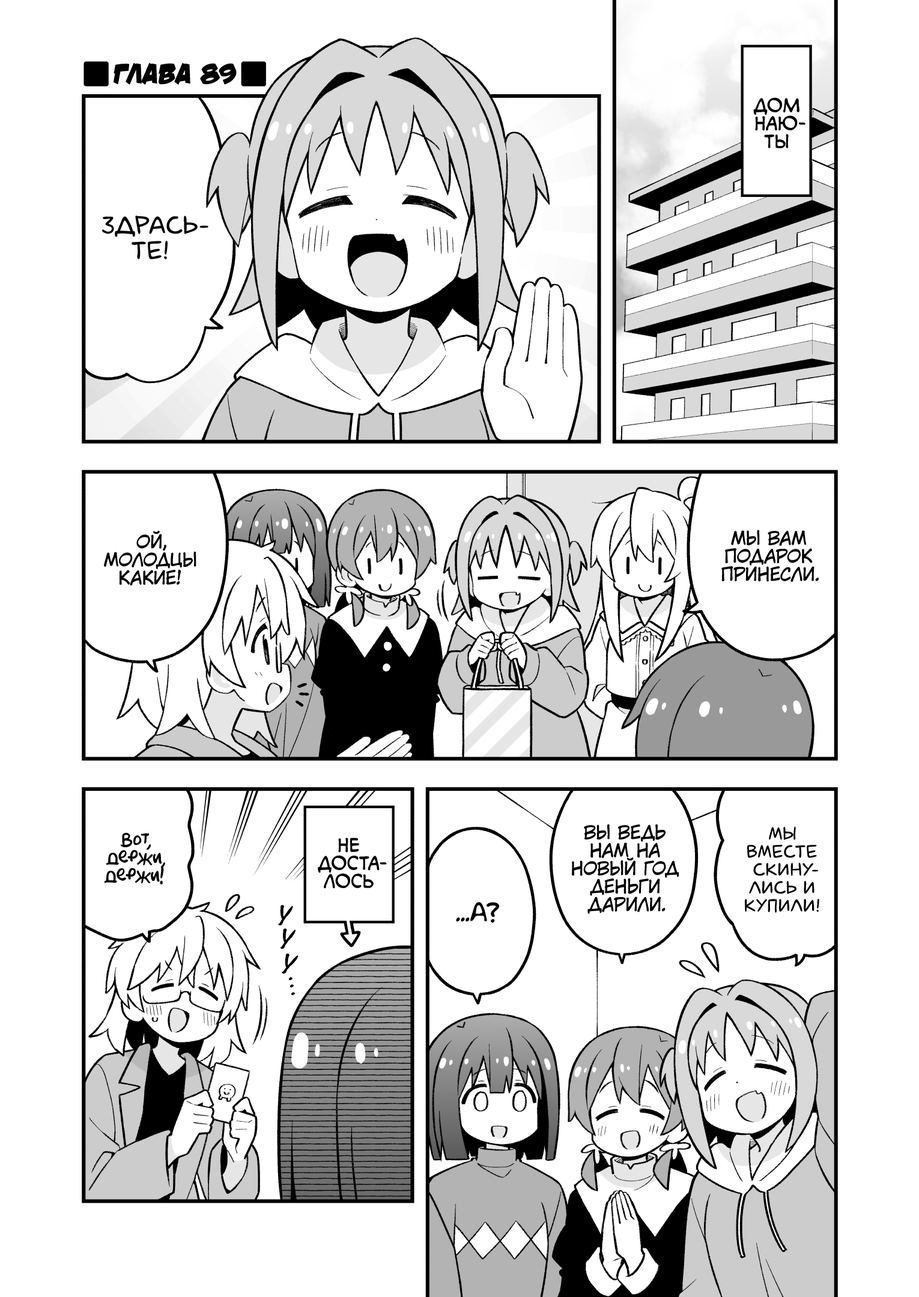
<style>
.page{position:relative;width:919px;height:1297px;background:#ffffff}
.page>*{position:absolute;margin:0}
.t1{font:28.8px "v_DamnNoisyKids";color:#000000;text-transform:uppercase}
.t2{font:18px "v_CCMonologous";color:#000000;text-transform:uppercase}
.t3{font:25.2px "laCartoonerie";color:#000000;text-transform:uppercase}
.t4{font:18px "KuraiVoice2";color:#000000;text-transform:uppercase}
.t5{font:18px "AkbarPlain";color:#000000}
.t6{font:18px "laCartoonerie";color:#000000;text-transform:uppercase}
.t7{font:28.8px "MistralC";color:#000000;text-transform:uppercase}
.t8{font:21.6px "AkbarPlain";color:#000000}
</style>
<div class="page">
<p class="t1" style="left:113px;top:62px;width:124px;height:23px">Глава 89</p>
<p class="t2" style="left:753px;top:97px;width:53px;height:51px;text-align:center">Дом<br>Наю-<br>ты</p>
<p class="t3" style="left:102px;top:216px;width:106px;height:43px;text-align:center">Здрась-<br>те!</p>
<p class="t4" style="left:104px;top:530px;width:92px;height:56px;text-align:center">Ой,<br>молодцы<br>какие!</p>
<p class="t4" style="left:721px;top:530px;width:98px;height:52px;text-align:center">Мы вам<br>подарок<br>принесли.</p>
<p class="t5" style="left:104px;top:833px;width:61px;height:52px;text-align:center">Вот,<br>держи,<br>держи!</p>
<p class="t4" style="left:572px;top:824px;width:107px;height:90px;text-align:center">Вы ведь<br>нам на<br>Новый Год<br>деньги<br>дарили.</p>
<p class="t6" style="left:745px;top:827px;width:74px;height:86px;text-align:center">Мы<br>вместе<br>скину-<br>лись и<br>купили!</p>
<p class="t2" style="left:318px;top:838px;width:69px;height:51px;text-align:center">Не<br>доста-<br>лось</p>
<p class="t7" style="left:278px;top:905px;width:15px;height:21px;rotate:10deg">у</p>
<p class="t8" style="left:456px;top:902px;width:43px;height:21px">...А?</p>
<p class="t7" style="left:280px;top:929px;width:16px;height:21px;rotate:12deg">у</p>
<p class="t7" style="left:282px;top:954px;width:17px;height:20px;rotate:16deg">у</p>
<p class="t7" style="left:288px;top:977px;width:5px;height:4px">.</p>
<p class="t7" style="left:290px;top:985px;width:4px;height:3px">.</p>
<p class="t7" style="left:291px;top:992px;width:4px;height:4px">.</p>
</div>
